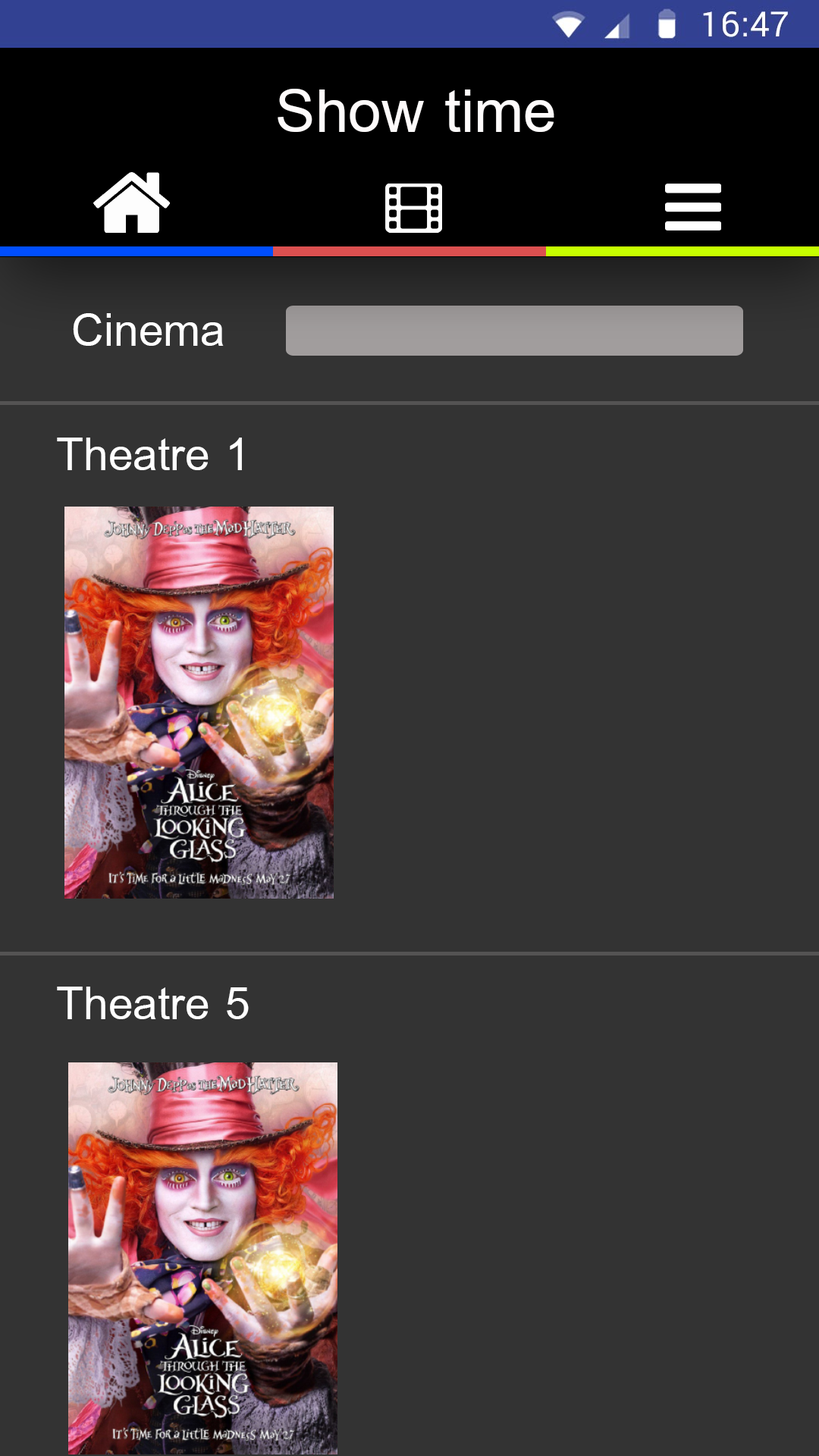
<style>
.page{position:relative;width:819px;height:1456px;background:#333333}
.page>*{position:absolute;margin:0}
.t1{font:91px "BrowalliaNew";color:#fefbfb}
.t2{font:68.2px "BrowalliaNew";color:#ffffff}
</style>
<div class="page">
<p class="t1" style="left:278px;top:89px;width:276px;height:43px">Show time</p>
<p class="t2" style="left:73px;top:313px;width:151px;height:33px">Cinema</p>
<p class="t2" style="left:57px;top:438px;width:185px;height:32px">Theatre 1</p>
<p class="t2" style="left:57px;top:987px;width:192px;height:32px">Theatre 5</p>
</div>
